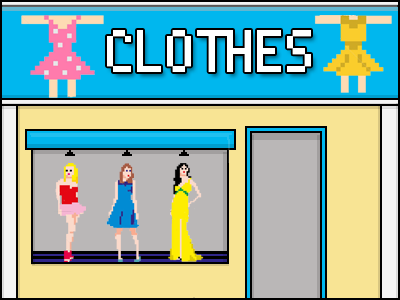
<style>
.page{position:relative;width:400px;height:300px;background:#f8e494}
.page>*{position:absolute;margin:0}
.t1{font:60px "PixelMplus10-Regular";color:#ffffff}
</style>
<div class="page">
<p class="t1" style="left:107px;top:30px;width:204px;height:42px">CLOTHES</p>
</div>
